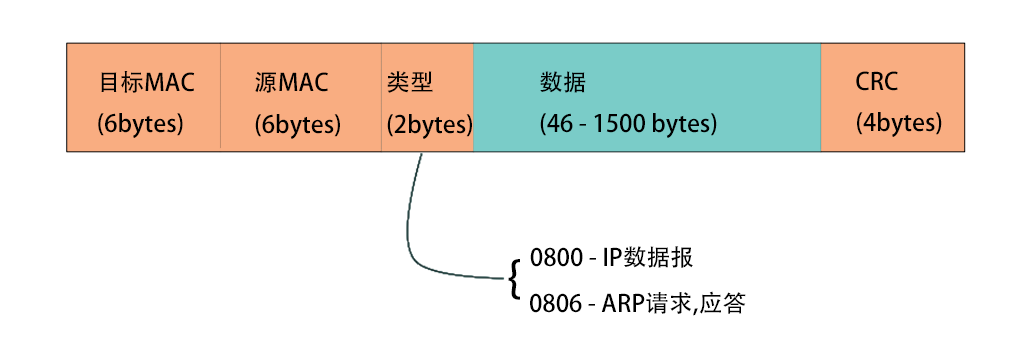
<style>
.page{position:relative;width:1024px;height:361px;background:#ffffff}
.page>*{position:absolute;margin:0}
.t1{font:23.8px "AdobeHeitiStd-Regular";color:#000000}
.t2{font:44.9px "AdobeHeitiStd-Regular";color:#000000}
</style>
<div class="page">
<p class="t1" style="left:98px;top:71px;width:97px;height:67px">目标MAC<br>(6bytes)</p>
<p class="t1" style="left:255px;top:71px;width:85px;height:68px">源MAC<br>(6bytes)</p>
<p class="t1" style="left:387px;top:71px;width:85px;height:68px">类型<br>(2bytes)</p>
<p class="t1" style="left:540px;top:71px;width:177px;height:67px">数据<br>(46 - 1500 bytes)</p>
<p class="t1" style="left:856px;top:71px;width:86px;height:66px">CRC<br>(4bytes)</p>
<p class="t1" style="left:530px;top:246px;width:163px;height:22px">0800 - IP数据报</p>
<p class="t2" style="left:508px;top:259px;width:12px;height:41px">{</p>
<p class="t1" style="left:530px;top:291px;width:216px;height:25px">0806 - ARP请求,应答</p>
</div>
